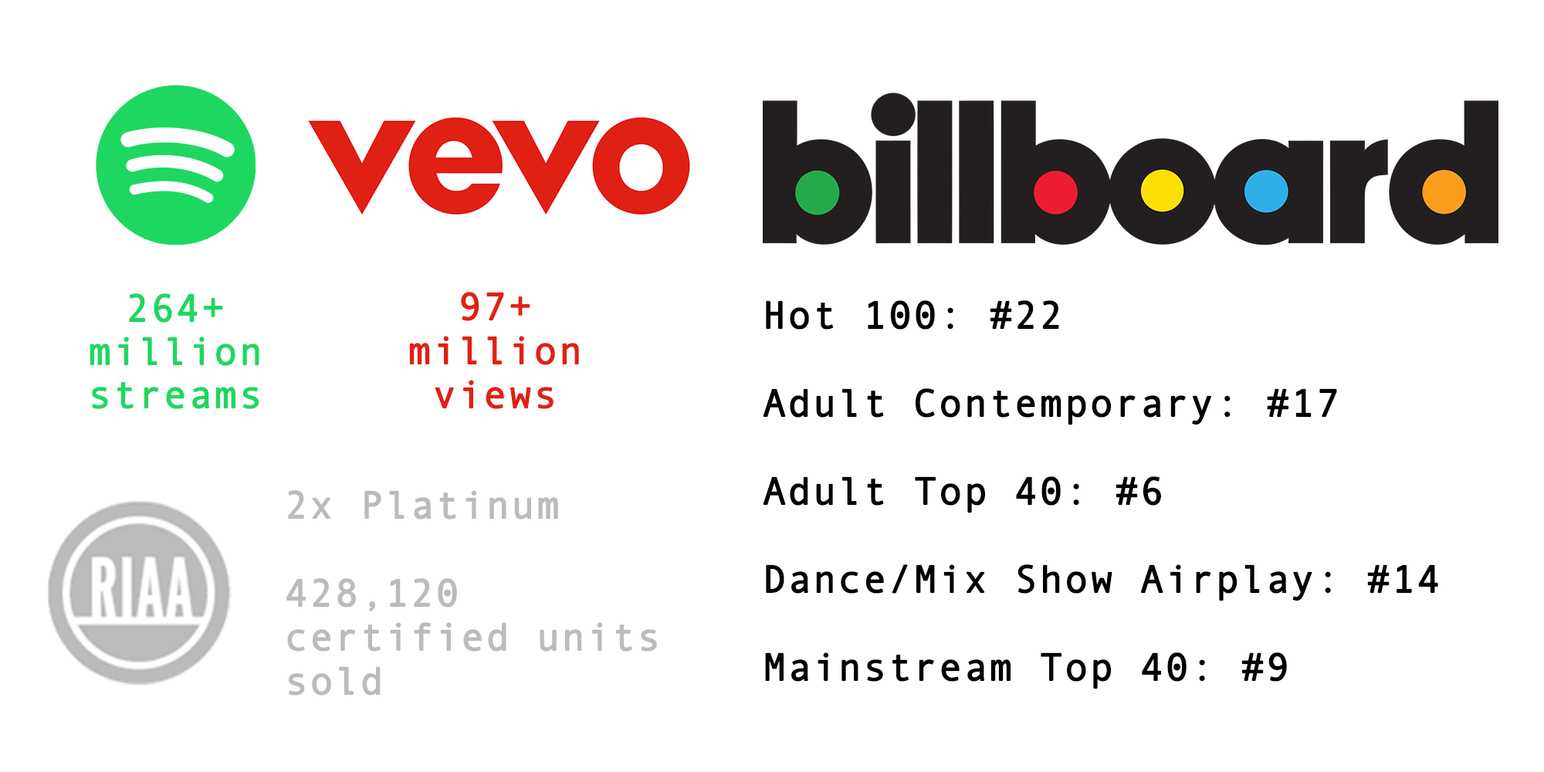
<style>
.page{position:relative;width:1544px;height:772px;background:#ffffff}
.page>*{position:absolute;margin:0}
.t1{font:38.6px/43.2px "AndaleMono";letter-spacing:0.025em;color:#1ed760;font-weight:bold}
.t2{font:38.6px/44px "AndaleMono";letter-spacing:0.025em;color:#e12014;font-weight:bold}
.t3{font:38.6px/44px "AndaleMono";letter-spacing:0.025em;color:#000000;font-weight:bold}
.t4{font:38.6px/44px "AndaleMono";letter-spacing:0.025em;color:#bbbbbb;font-weight:bold}
</style>
<div class="page">
<p class="t1" style="left:90px;top:293px;width:169px;height:116px;text-align:center">264+ <br>million<br>streams</p>
<p class="t2" style="left:409px;top:292px;width:170px;height:117px;text-align:center">97+ <br>million<br>views</p>
<p class="t3" style="left:763px;top:300px;width:676px;height:389px">Hot 100: #22<br><br>Adult Contemporary: #17<br><br>Adult Top 40: #6<br><br>Dance/Mix Show Airplay: #14<br><br>Mainstream Top 40: #9</p>
<p class="t4" style="left:286px;top:490px;width:371px;height:206px">2x Platinum<br><br>428,120 <br>certified units sold</p>
</div>
